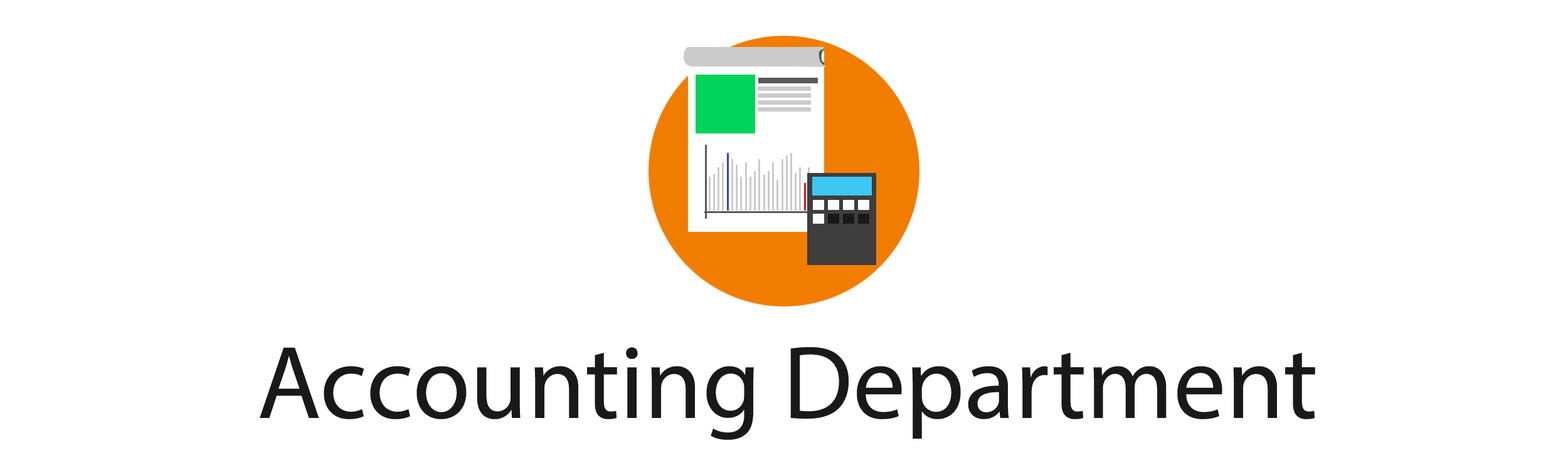
<style>
.page{position:relative;width:1568px;height:470px;background:#ffffff}
.page>*{position:absolute;margin:0}
.t1{font:104.5px "MyriadPro-Regular";color:#191919}
</style>
<div class="page">
<p class="t1" style="left:260px;top:347px;width:1055px;height:93px">Accounting Department</p>
</div>
